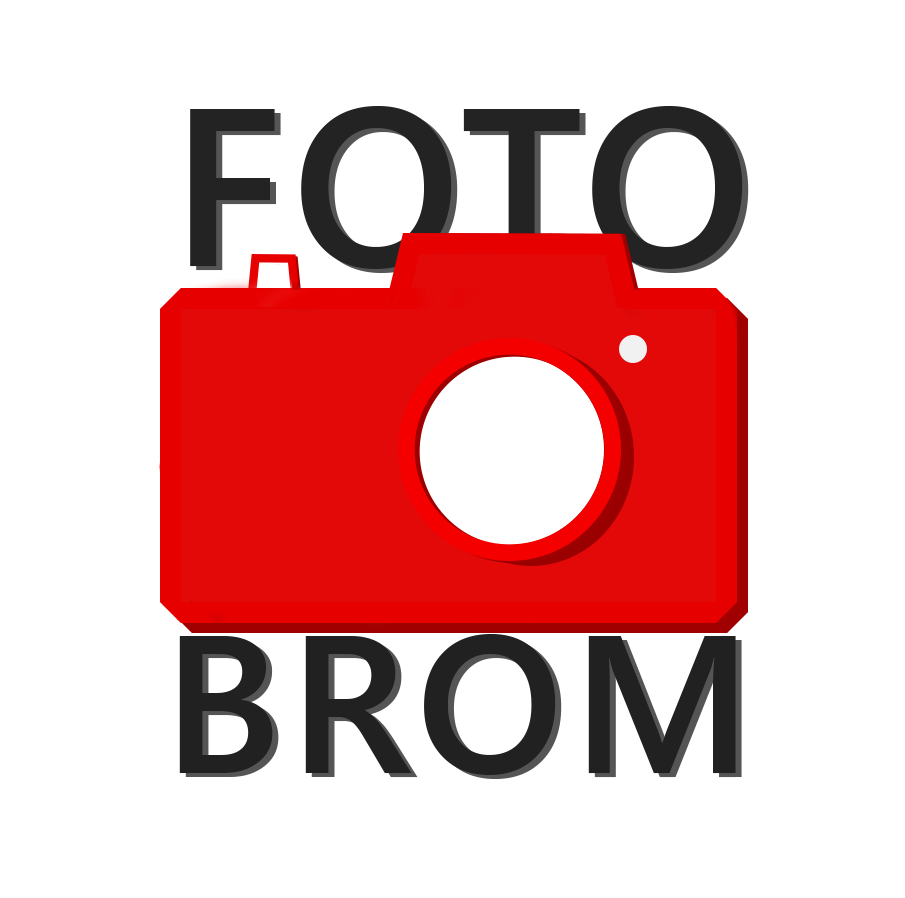
<style>
.page{position:relative;width:905px;height:898px;background:#ffffff}
.page>*{position:absolute;margin:0}
.t1{font:224px "SegoeUI-Semibold";letter-spacing:0.04em;color:#232323}
.t2{font:195.8px "SegoeUI-Semibold";letter-spacing:0.04em;color:#212121}
</style>
<div class="page">
<p class="t1" style="left:190px;top:106px;width:553px;height:163px">FOTO</p>
<p class="t1" style="left:196px;top:110px;width:553px;height:163px">FOTO</p>
<p class="t2" style="left:179px;top:634px;width:557px;height:141px">BROM</p>
<p class="t2" style="left:185px;top:638px;width:557px;height:141px">BROM</p>
</div>
